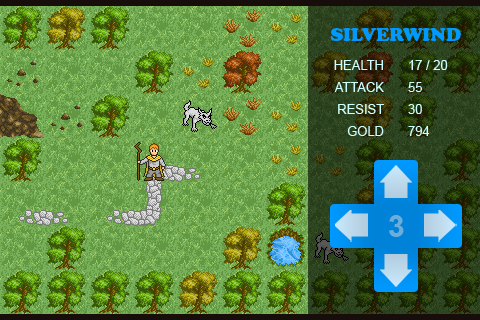
<style>
.page{position:relative;width:480px;height:320px;background:#78b159}
.page>*{position:absolute;margin:0}
.t1{font:18px "CooperBlackStd";color:#0099ff}
.t2{font:13px "ArialMT";color:#ccffff}
.t3{font:30px "Arial-BoldMT";color:#6daed9}
</style>
<div class="page">
<p class="t1" style="left:330px;top:27px;width:131px;height:15px">SILVERWIND</p>
<p class="t2" style="left:334px;top:60px;width:49px;height:10px">HEALTH</p>
<p class="t2" style="left:409px;top:60px;width:39px;height:10px">17 / 20</p>
<p class="t2" style="left:334px;top:82px;width:50px;height:10px">ATTACK</p>
<p class="t2" style="left:408px;top:82px;width:14px;height:10px">55</p>
<p class="t2" style="left:338px;top:104px;width:46px;height:10px">RESIST</p>
<p class="t2" style="left:408px;top:104px;width:14px;height:10px">30</p>
<p class="t2" style="left:347px;top:126px;width:37px;height:10px">GOLD</p>
<p class="t2" style="left:408px;top:126px;width:22px;height:10px">794</p>
<p class="t3" style="left:389px;top:215px;width:15px;height:22px">3</p>
</div>
